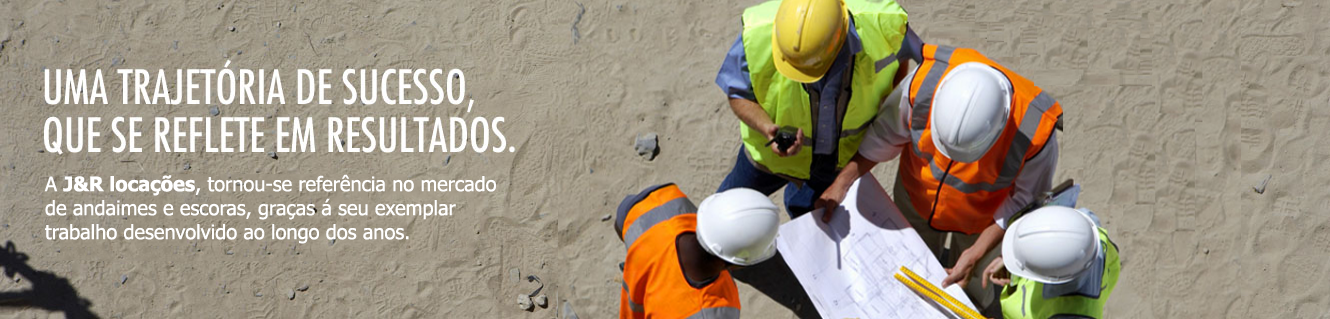
<style>
.page{position:relative;width:1330px;height:319px}
.page>*{position:absolute;margin:0}
.t1{font:20px "Tahoma";color:#ffffff}
.t2{font:20px "Tahoma-Bold";color:#ffffff}
</style>
<div class="page">
<p class="t1" style="left:44px;top:174px;width:452px;height:70px">A <span class="t2">J&amp;R locações</span>, tornou-se referência no mercado de andaimes e escoras, graças á seu exemplar trabalho desenvolvido ao longo dos anos.</p>
</div>
